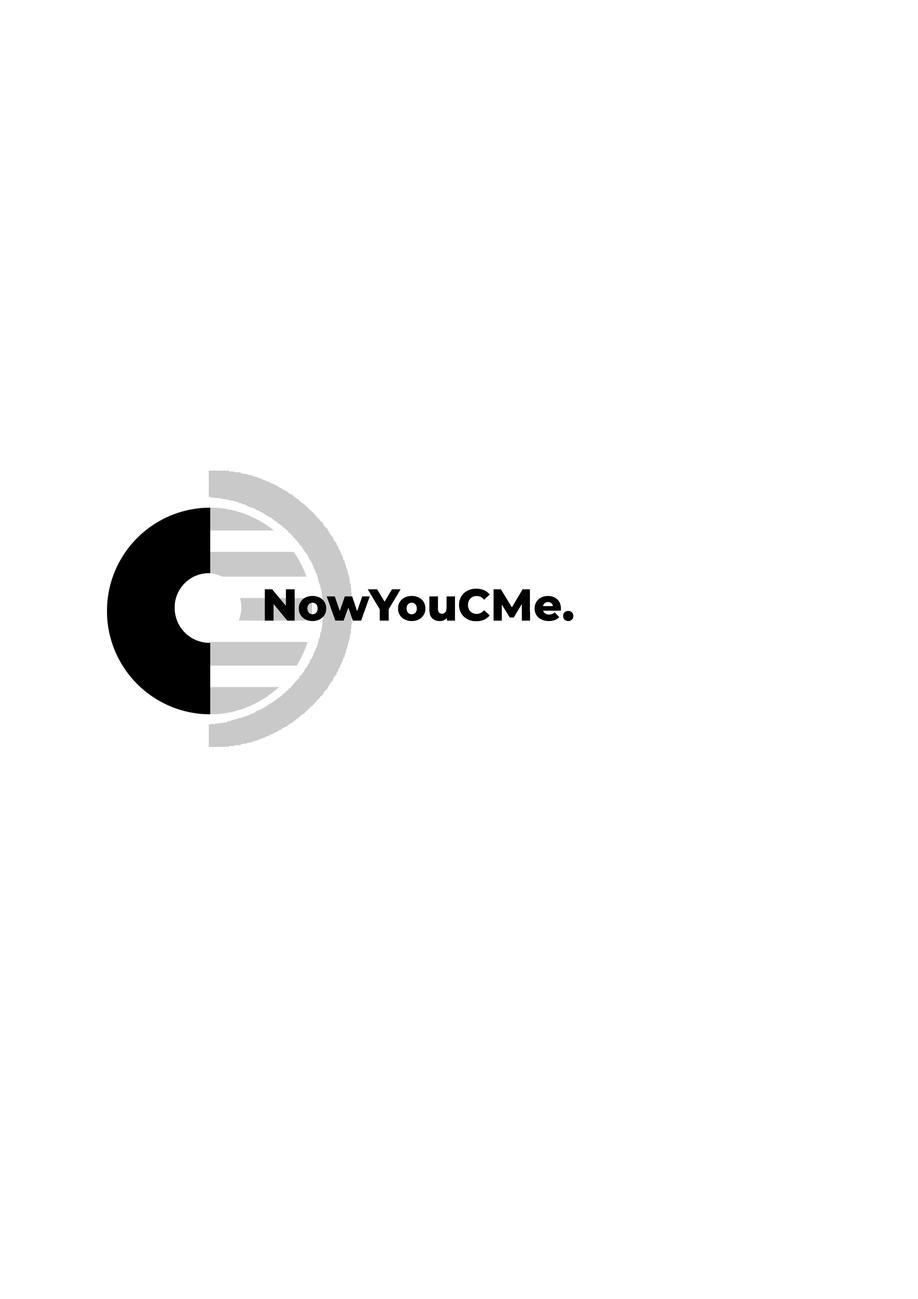
<style>
.page{position:relative;width:918px;height:1299px;background:#ffffff}
.page>*{position:absolute;margin:0}
.t1{font:44.7px "Montserrat-ExtraBold";color:#000000}
</style>
<div class="page">
<p class="t1" style="left:265px;top:588px;width:308px;height:33px">NowYouCMe.</p>
</div>
